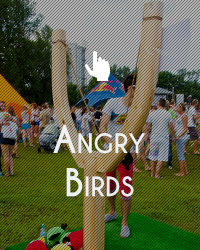
<style>
.page{position:relative;width:200px;height:250px}
.page>*{position:absolute;margin:0}
.t1{font:36px "CaviarDreams-Bold";color:#ecf0f1;font-variant:small-caps}
</style>
<div class="page">
<p class="t1" style="left:53px;top:124px;width:92px;height:73px;text-align:center">Angry<br>Birds</p>
</div>
